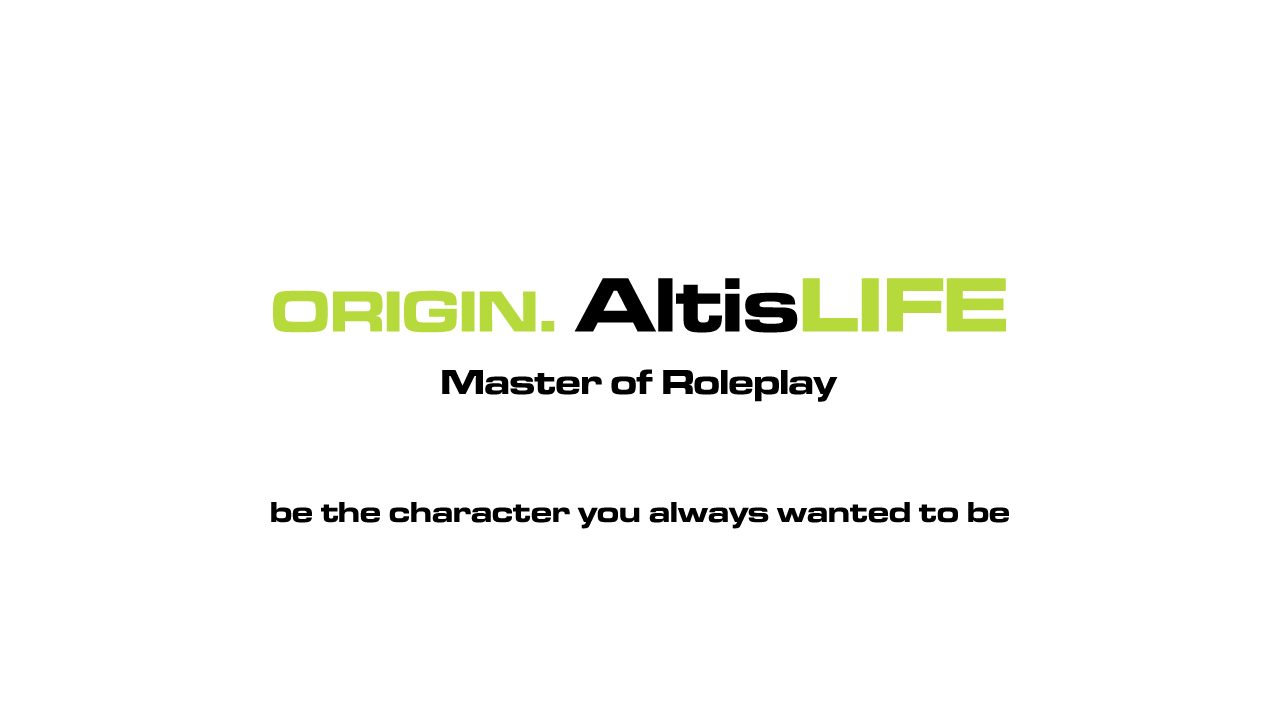
<style>
.page{position:relative;width:1280px;height:720px;background:#ffffff}
.page>*{position:absolute;margin:0}
.t1{font:60px "MicrogrammaDOT-BoldExtended";color:#b6da3b}
.t2{font:80px "MicrogrammaDOT-BoldExtended";color:#000000}
.t3{font:80px "MicrogrammaDOT-BoldExtended";color:#b6da3b}
.t4{font:36px "MicrogrammaDOT-BoldExtended";color:#000000}
.t5{font:30px "MicrogrammaDOT-BoldExtended";color:#000000}
</style>
<div class="page">
<p class="t1" style="left:273px;top:278px;width:733px;height:55px">ORIGIN. <span class="t2">Altis</span><span class="t3">LIFE</span></p>
<p class="t4" style="left:442px;top:369px;width:396px;height:33px">Master of Roleplay</p>
<p class="t5" style="left:271px;top:502px;width:738px;height:27px">be the character you always wanted to be</p>
</div>
